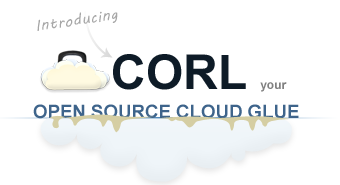
<style>
.page{position:relative;width:340px;height:185px;background:#ffffff}
.page>*{position:absolute;margin:0}
.t1{font:15px "MVBoli";letter-spacing:0.04em;color:#a6a6a6}
.t2{font:48px "Arial-BoldMT";color:#0e1b27}
.t3{font:12px "Arial-BoldMT";color:#808080}
.t4{font:18.5px "Arial-BoldMT";color:#3e648b}
</style>
<div class="page">
<p class="t1" style="left:37px;top:11px;width:81px;height:20px;rotate:-8deg">Introducing</p>
<p class="t2" style="left:113px;top:54px;width:174px;height:38px">CORL <span class="t3">your</span></p>
<p class="t4" style="left:33px;top:104px;width:266px;height:15px">OPEN SOURCE CLOUD GLUE</p>
</div>
